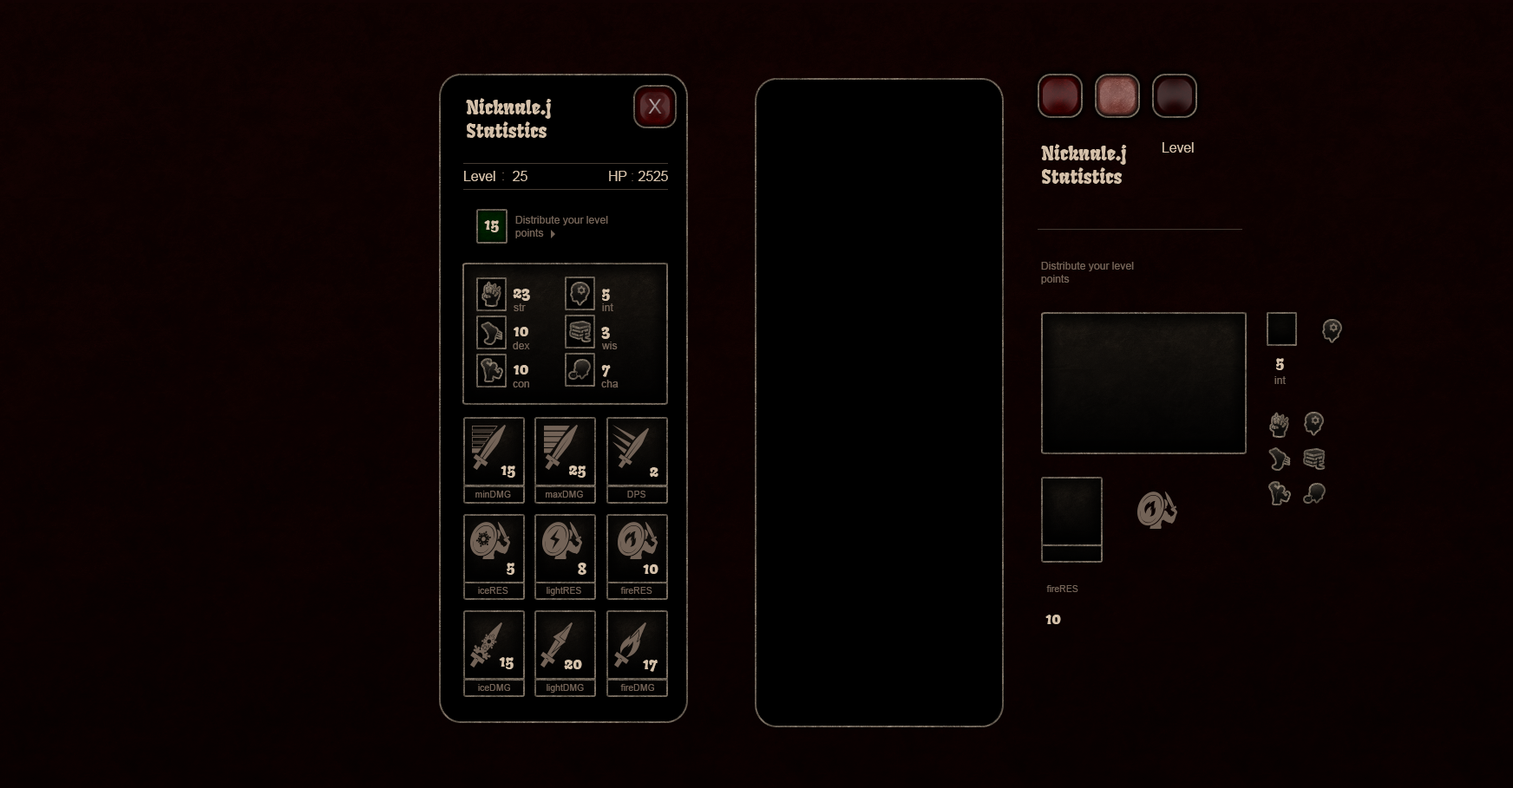
<style>
.page{position:relative;width:1513px;height:788px;background:#000000}
.page>*{position:absolute;margin:0}
.t1{font:19.1px "Fruktur-Regular";color:#d5c1aa}
.t2{font:13.6px "ArialMT";color:#d5c1aa}
.t3{font:13.6px "ArialMT";color:#736357}
.t4{font:13.6px "ArialMT";color:#64564b}
.t5{font:16.3px "Fruktur-Regular";color:#d5c1aa}
.t6{font:10.5px "ArialMT";color:#736357}
.t7{font:9.2px "ArialMT";color:#736357}
</style>
<div class="page">
<p class="t1" style="left:466px;top:98px;width:86px;height:40px">Nicknale.j<br>Statistics</p>
<p class="t1" style="left:1041px;top:144px;width:86px;height:40px">Nicknale.j<br>Statistics</p>
<p class="t2" style="left:1162px;top:142px;width:31px;height:11px">Level</p>
<p class="t2" style="left:464px;top:171px;width:31px;height:10px">Level</p>
<p class="t3" style="left:502px;top:173px;width:2px;height:7px">:</p>
<p class="t2" style="left:513px;top:171px;width:14px;height:10px">25</p>
<p class="t2" style="left:609px;top:171px;width:59px;height:10px">HP <span class="t4">:</span> 2525</p>
<p class="t5" style="left:484px;top:220px;width:15px;height:12px">15</p>
<p class="t6" style="left:515px;top:216px;width:93px;height:23px">Distribute your level <br>points</p>
<p class="t6" style="left:1041px;top:262px;width:93px;height:22px">Distribute your level <br>points</p>
<p class="t5" style="left:513px;top:289px;width:17px;height:12px">23</p>
<p class="t5" style="left:602px;top:289px;width:8px;height:12px">5</p>
<p class="t6" style="left:513px;top:304px;width:13px;height:7px">str</p>
<p class="t6" style="left:602px;top:304px;width:11px;height:7px">int</p>
<p class="t5" style="left:513px;top:327px;width:15px;height:10px">10</p>
<p class="t5" style="left:601px;top:327px;width:9px;height:12px">3</p>
<p class="t6" style="left:513px;top:342px;width:17px;height:8px">dex</p>
<p class="t6" style="left:602px;top:342px;width:16px;height:8px">wis</p>
<p class="t5" style="left:513px;top:365px;width:15px;height:10px">10</p>
<p class="t5" style="left:601px;top:365px;width:10px;height:12px">7</p>
<p class="t5" style="left:1276px;top:358px;width:8px;height:12px">5</p>
<p class="t6" style="left:1274px;top:376px;width:11px;height:8px">int</p>
<p class="t6" style="left:513px;top:382px;width:16px;height:6px">con</p>
<p class="t6" style="left:601px;top:380px;width:17px;height:8px">cha</p>
<p class="t5" style="left:500px;top:466px;width:15px;height:12px">15</p>
<p class="t5" style="left:569px;top:466px;width:16px;height:12px">25</p>
<p class="t5" style="left:650px;top:467px;width:8px;height:10px">2</p>
<p class="t7" style="left:475px;top:491px;width:36px;height:7px">minDMG</p>
<p class="t7" style="left:546px;top:491px;width:37px;height:7px">maxDMG</p>
<p class="t7" style="left:627px;top:491px;width:18px;height:7px">DPS</p>
<p class="t5" style="left:506px;top:563px;width:8px;height:12px">5</p>
<p class="t5" style="left:578px;top:563px;width:8px;height:12px">8</p>
<p class="t5" style="left:643px;top:565px;width:15px;height:9px">10</p>
<p class="t7" style="left:478px;top:587px;width:30px;height:7px">iceRES</p>
<p class="t7" style="left:546px;top:587px;width:35px;height:9px">lightRES</p>
<p class="t7" style="left:620px;top:587px;width:32px;height:7px">fireRES</p>
<p class="t7" style="left:1046px;top:585px;width:32px;height:7px">fireRES</p>
<p class="t5" style="left:1045px;top:615px;width:16px;height:9px">10</p>
<p class="t5" style="left:499px;top:657px;width:14px;height:13px">15</p>
<p class="t5" style="left:564px;top:660px;width:18px;height:10px">20</p>
<p class="t5" style="left:643px;top:660px;width:14px;height:12px">17</p>
<p class="t7" style="left:478px;top:684px;width:32px;height:7px">iceDMG</p>
<p class="t7" style="left:546px;top:684px;width:38px;height:9px">lightDMG</p>
<p class="t7" style="left:620px;top:684px;width:34px;height:7px">fireDMG</p>
</div>
